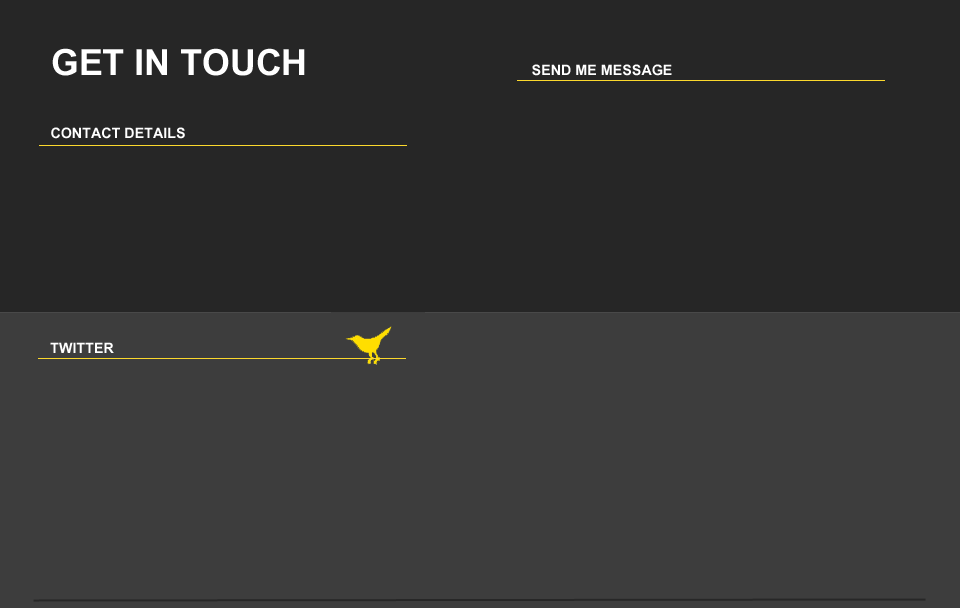
<style>
.page{position:relative;width:960px;height:608px;background:#262626}
.page>*{position:absolute;margin:0}
.t1{font:50px "Utsaah-Bold";color:#ffffff}
.t2{font:20px "Utsaah-Bold";color:#ffffff}
</style>
<div class="page">
<p class="t1" style="left:52px;top:48px;width:253px;height:28px">GET IN TOUCH</p>
<p class="t2" style="left:532px;top:64px;width:140px;height:12px">SEND ME MESSAGE</p>
<p class="t2" style="left:51px;top:127px;width:134px;height:12px">CONTACT DETAILS</p>
<p class="t2" style="left:50px;top:342px;width:64px;height:11px">TWITTER</p>
</div>
